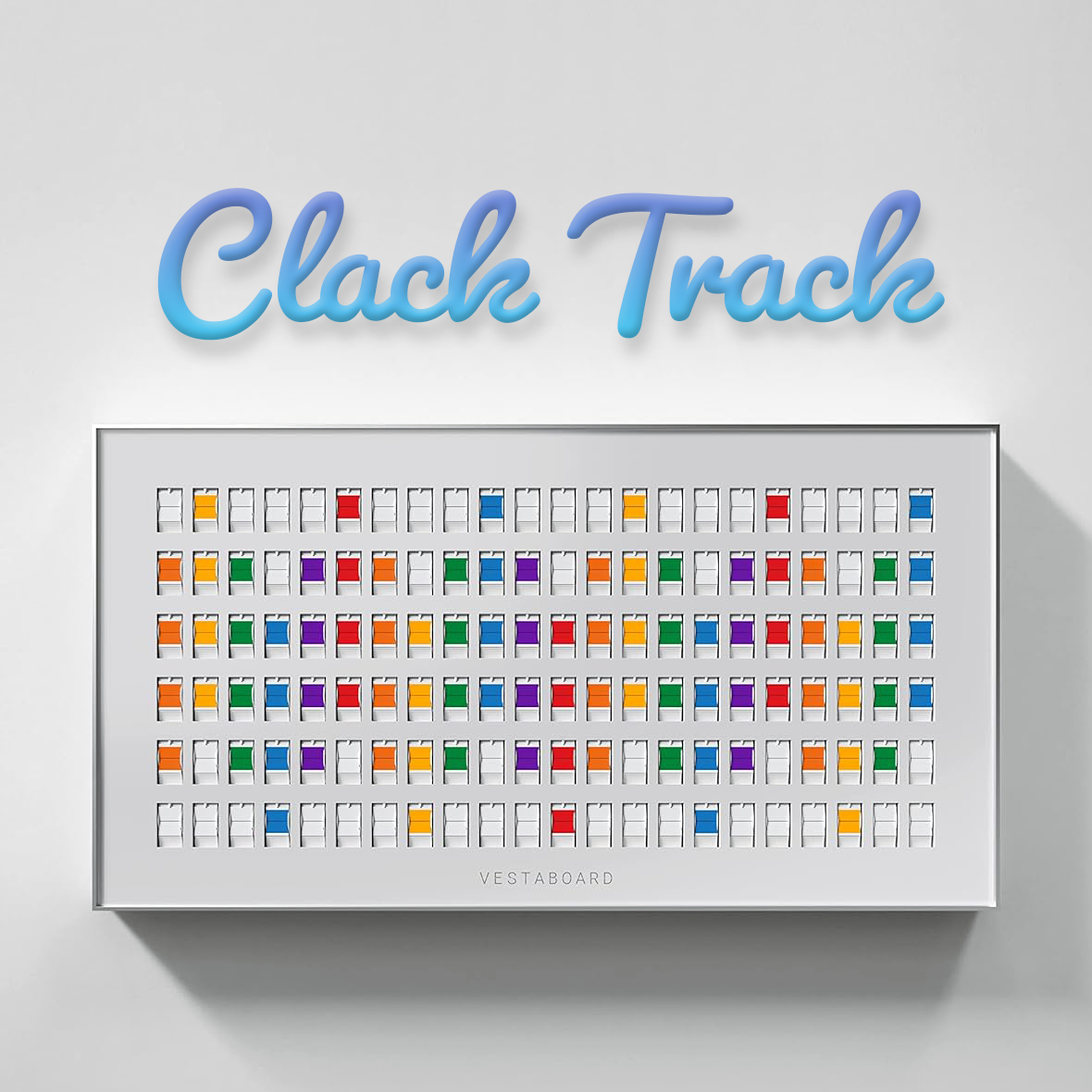
<style>
.page{position:relative;width:1092px;height:1092px}
.page>*{position:absolute;margin:0}
.t1{font:197.7px "Pacifico-Bold"}
</style>
<div class="page">
<p class="t1" style="left:157px;top:188px;width:788px;height:153px">Clack Track</p>
</div>
